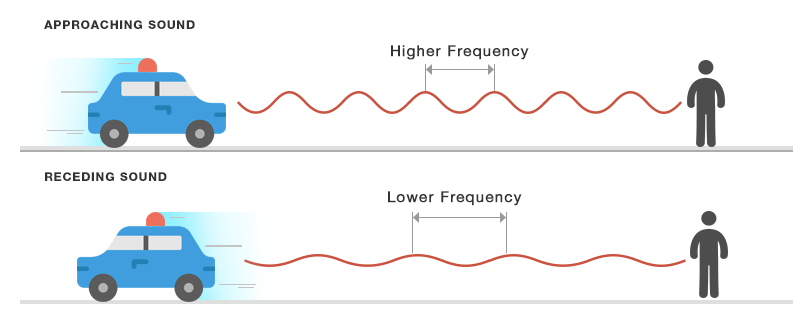
<style>
.page{position:relative;width:800px;height:323px;background:#ffffff}
.page>*{position:absolute;margin:0}
.t1{font:12px "HelveticaNeueCyr-Black";letter-spacing:0.06em;color:#323232;text-transform:uppercase}
.t2{font:15px "HelveticaNeue";letter-spacing:0.06em;color:#323232;font-weight:bold}
</style>
<div class="page">
<p class="t1" style="left:44px;top:20px;width:151px;height:9px">Approaching Sound</p>
<p class="t2" style="left:391px;top:45px;width:138px;height:15px">Higher Frequency</p>
<p class="t1" style="left:45px;top:172px;width:122px;height:9px">Receding Sound</p>
<p class="t2" style="left:388px;top:191px;width:134px;height:15px">Lower Frequency</p>
</div>
